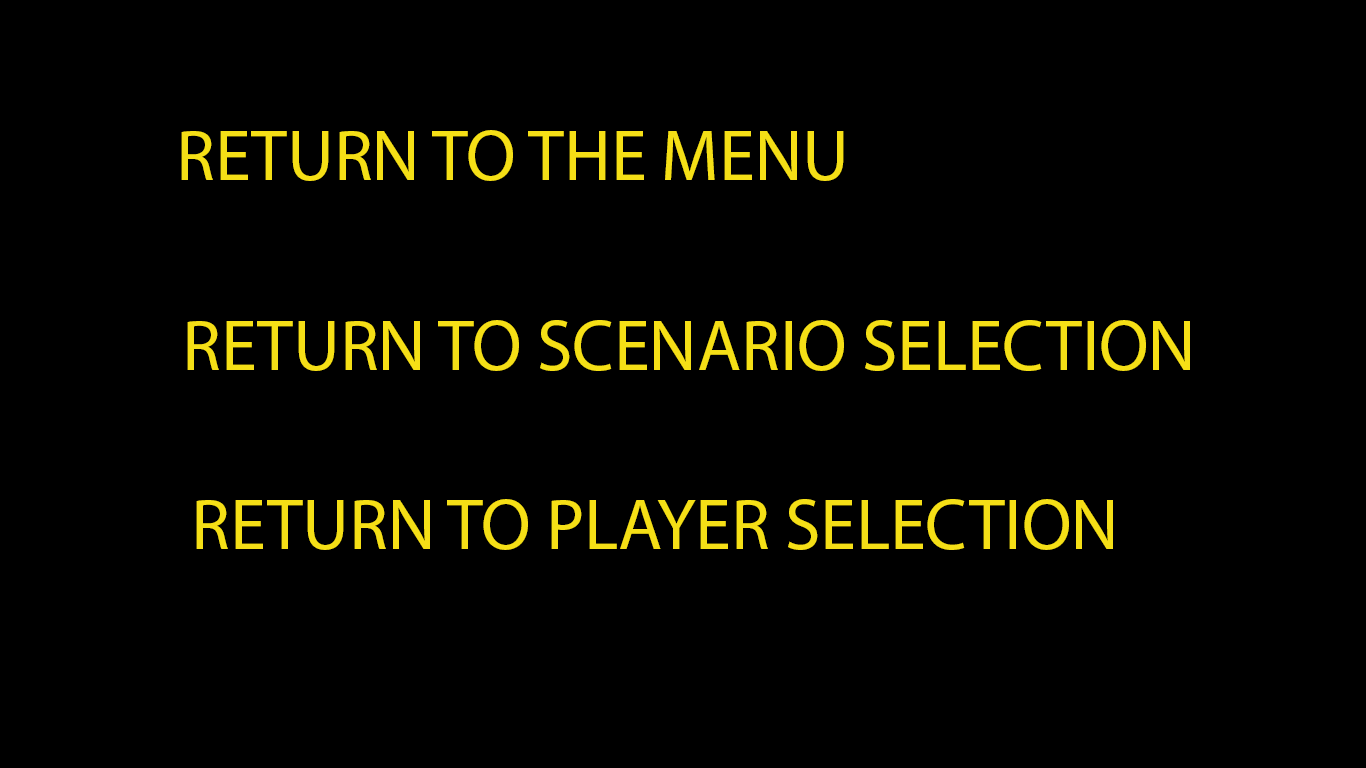
<style>
.page{position:relative;width:1366px;height:768px;background:#000000}
.page>*{position:absolute;margin:0}
.t1{font:72px "MyriadPro-Regular";color:#f5df16}
</style>
<div class="page">
<p class="t1" style="left:181px;top:130px;width:663px;height:51px">RETURN TO THE MENU</p>
<p class="t1" style="left:187px;top:320px;width:1003px;height:51px">RETURN TO SCENARIO SELECTION</p>
<p class="t1" style="left:196px;top:499px;width:917px;height:51px">RETURN TO PLAYER SELECTION</p>
</div>
